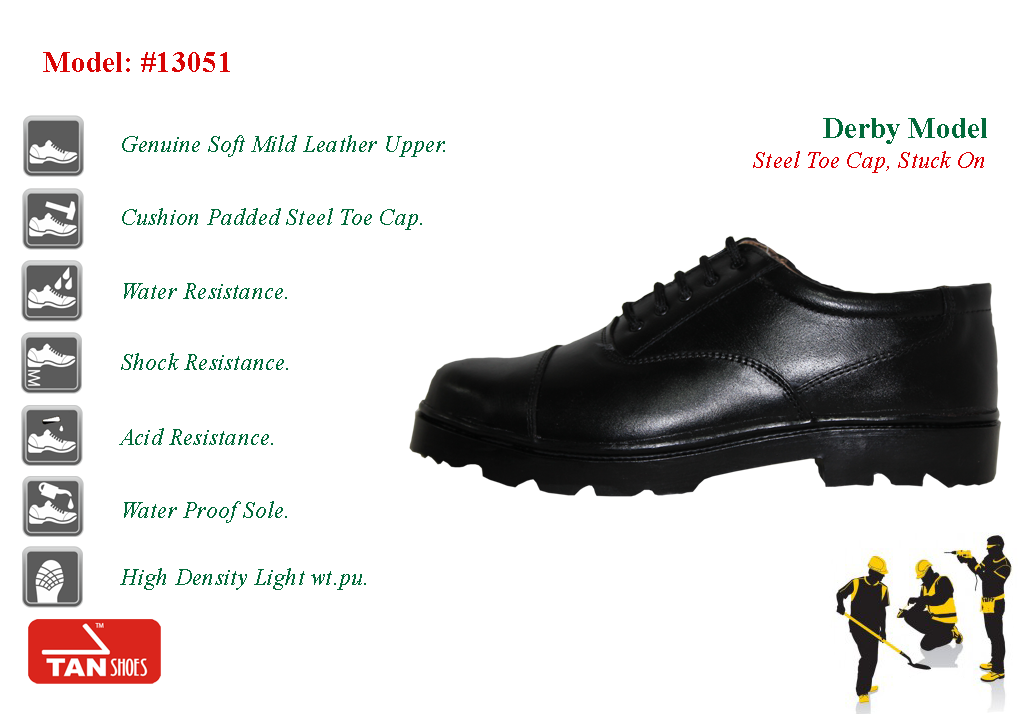
<style>
.page{position:relative;width:1024px;height:714px;background:#ffffff}
.page>*{position:absolute;margin:0}
.t1{font:30px "TimesNewRomanPS-BoldMT";letter-spacing:0.01em;color:#d80505;scale:0.95 1}
.t2{font:30px "TimesNewRomanPS-BoldMT";letter-spacing:0.01em;color:#026a3a;scale:0.95 1}
.t3{font:24px "TimesNewRomanPS-ItalicMT";letter-spacing:0.01em;color:#026a3a;scale:0.95 1}
.t4{font:24px "TimesNewRomanPS-ItalicMT";letter-spacing:0.01em;color:#dc0207;scale:0.95 1}
</style>
<div class="page">
<p class="t1" style="left:43px;top:52px;width:187px;height:20px">Model: #13051</p>
<p class="t2" style="left:823px;top:118px;width:164px;height:26px">Derby Model</p>
<p class="t3" style="left:122px;top:135px;width:323px;height:22px">Genuine Soft Mild Leather Upper.</p>
<p class="t4" style="left:753px;top:151px;width:231px;height:22px">Steel Toe Cap, Stuck On</p>
<p class="t3" style="left:122px;top:208px;width:300px;height:22px">Cushion Padded Steel Toe Cap.</p>
<p class="t3" style="left:124px;top:283px;width:163px;height:16px">Water Resistance.</p>
<p class="t3" style="left:121px;top:353px;width:167px;height:17px">Shock Resistance.</p>
<p class="t3" style="left:119px;top:428px;width:154px;height:17px">Acid Resistance.</p>
<p class="t3" style="left:124px;top:501px;width:163px;height:22px">Water Proof Sole.</p>
<p class="t3" style="left:120px;top:568px;width:246px;height:22px">High Density Light wt.pu.</p>
</div>
